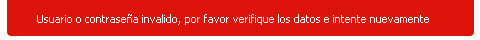
<style>
.page{position:relative;width:480px;height:40px;background:#dd140a}
.page>*{position:absolute;margin:0}
.t1{font:11px "Tahoma";color:#fbfbf9}
</style>
<div class="page">
<p class="t1" style="left:37px;top:14px;width:392px;height:11px">Usuario o contraseña invalido, por favor verifique los datos e intente nuevamente</p>
</div>
